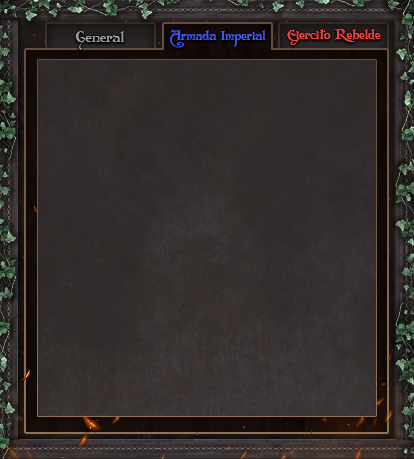
<style>
.page{position:relative;width:414px;height:459px}
.page>*{position:absolute;margin:0}
.t1{font:13.1px "Folkard";color:#415af6}
.t2{font:13.4px "Folkard";color:#f64141}
.t3{font:15.1px "Folkard";color:#a0a1a3}
</style>
<div class="page">
<p class="t1" style="left:170px;top:29px;width:96px;height:19px">Armada Imperial</p>
<p class="t2" style="left:287px;top:29px;width:94px;height:16px">Ejercito Rebelde</p>
<p class="t3" style="left:75px;top:31px;width:49px;height:19px">General</p>
</div>
